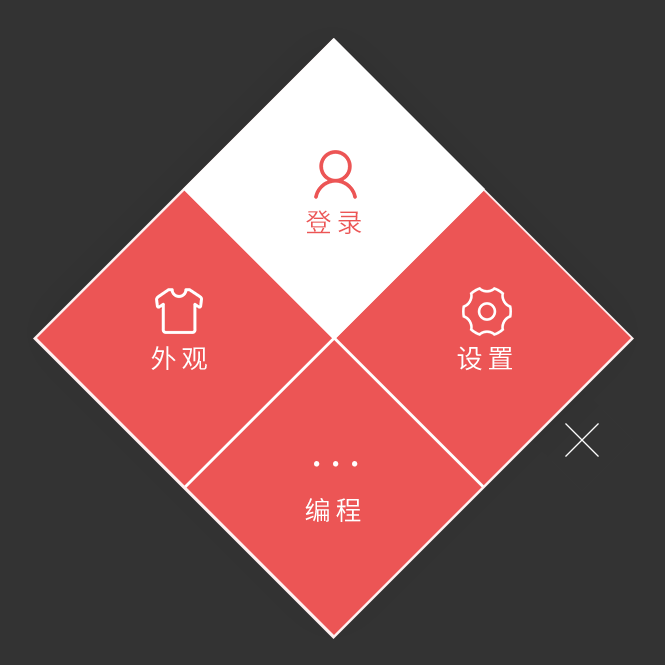
<style>
.page{position:relative;width:665px;height:665px;background:#333333}
.page>*{position:absolute;margin:0}
.t1{font:26.1px "SourceHanSansCN-Normal";letter-spacing:0.185em;color:#ec5555}
.t2{font:26.1px "SourceHanSansCN-Normal";letter-spacing:0.185em;color:#ffffff}
.t3{font:41.5px "SourceHanSansCN-Normal";letter-spacing:0.185em;color:#ffffff}
</style>
<div class="page">
<p class="t1" style="left:306px;top:210px;width:56px;height:24px">登录</p>
<p class="t2" style="left:151px;top:346px;width:56px;height:24px">外观</p>
<p class="t2" style="left:457px;top:346px;width:55px;height:25px">设置</p>
<p class="t3" style="left:314px;top:461px;width:44px;height:6px">...</p>
<p class="t2" style="left:305px;top:498px;width:56px;height:24px">编程</p>
</div>
